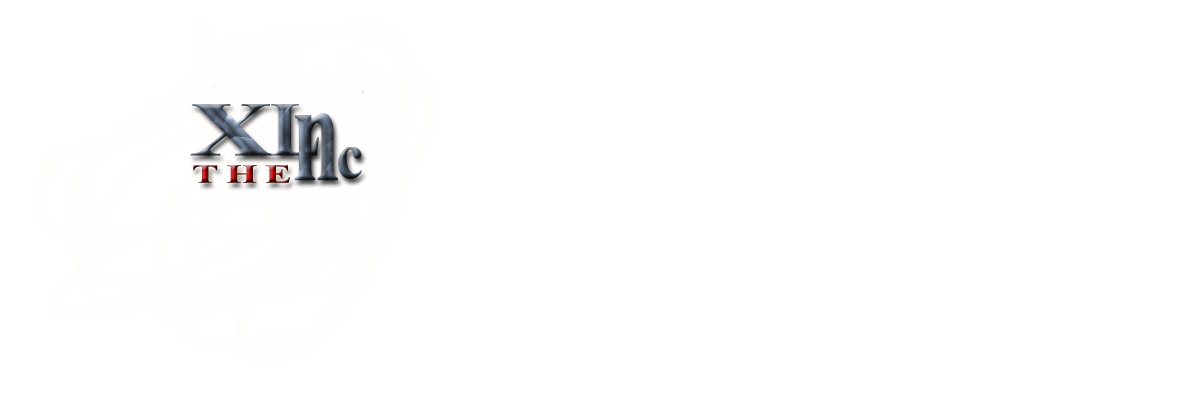
<style>
.page{position:relative;width:1200px;height:400px;background:#ffffff}
.page>*{position:absolute;margin:0}
.t1{font:77.3px "TimesNewRomanPS-BoldMT";letter-spacing:0.2em;scale:1.49 1}
.t2{font:77.3px "TimesNewRomanPS-BoldMT";letter-spacing:0.2em}
.t3{font:142.5px "TimesNewRomanPS-BoldMT";letter-spacing:0.2em;scale:0.61 1}
.t4{font:65.9px "TimesNewRomanPS-BoldMT";letter-spacing:0.2em;scale:0.94 1}
.t5{font:26px "TimesNewRomanPS-BoldMT";letter-spacing:0.2em;scale:1.52 1}
</style>
<div class="page">
<p class="t1" style="left:190px;top:104px;width:83px;height:52px">X</p>
<p class="t2" style="left:271px;top:104px;width:48px;height:52px">L</p>
<p class="t3" style="left:294px;top:113px;width:44px;height:68px">n</p>
<p class="t4" style="left:338px;top:147px;width:24px;height:32px">c</p>
<p class="t5" style="left:193px;top:165px;width:97px;height:18px">THE</p>
</div>
